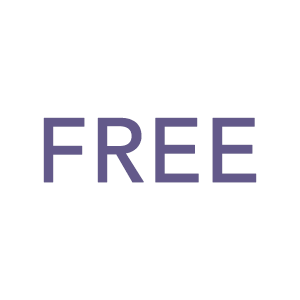
<style>
.page{position:relative;width:300px;height:300px;background:#ffffff}
.page>*{position:absolute;margin:0}
.t1{font:90px "Avenir-Medium";color:#63598a;font-weight:bold}
</style>
<div class="page">
<p class="t1" style="left:43px;top:117px;width:214px;height:66px">FREE</p>
</div>
